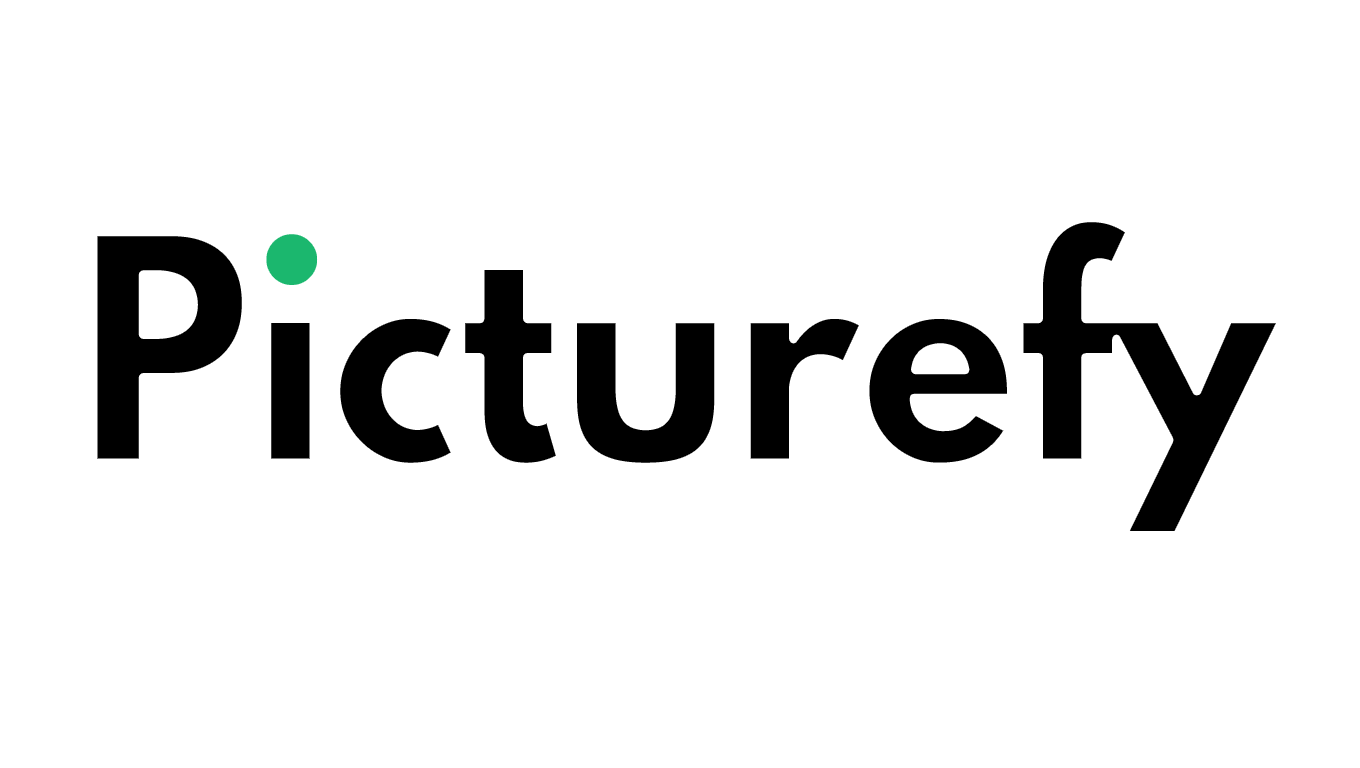
<style>
.page{position:relative;width:1360px;height:768px;background:#ffffff}
.page>*{position:absolute;margin:0}
.t1{font:278.9px "LeagueSpartan-Bold";color:#000000;scale:0.94 1}
</style>
<div class="page">
<p class="t1" style="left:93px;top:218px;width:1189px;height:317px">Picturefy</p>
</div>
